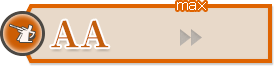
<style>
.page{position:relative;width:274px;height:69px;background:#e8d9c9}
.page>*{position:absolute;margin:0}
.t1{font:36px "RyuminPro-ExBold";color:#c35e0c}
</style>
<div class="page">
<p class="t1" style="left:51px;top:20px;width:58px;height:28px">AA</p>
</div>
